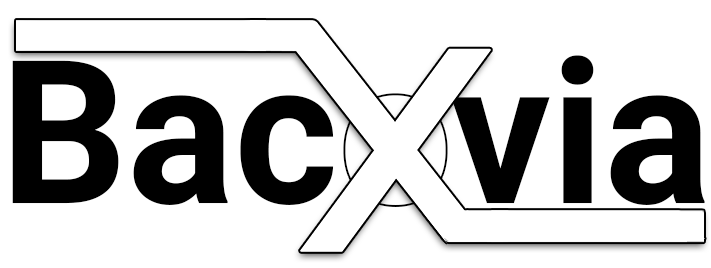
<style>
.page{position:relative;width:711px;height:268px;background:#ffffff}
.page>*{position:absolute;margin:0}
.t1{font:200px "Roboto-Bold";letter-spacing:-0.001em;color:#000000}
.t2{font:200px "Roboto-Bold";letter-spacing:-0.001em;color:#ff0000}
</style>
<div class="page">
<p class="t1" style="left:12px;top:55px;width:693px;height:150px">Bac<span class="t2">o</span>via</p>
</div>
